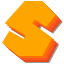
<style>
.page{position:relative;width:64px;height:64px;background:#ffa500}
.page>*{position:absolute;margin:0}
.t1{font:74.4px "SuperMarioGalaxy";color:#ffa500}
</style>
<div class="page">
<p class="t1" style="left:2px;top:1px;width:54px;height:55px">s</p>
<p class="t1" style="left:4px;top:3px;width:54px;height:55px">s</p>
<p class="t1" style="left:6px;top:5px;width:54px;height:55px">s</p>
<p class="t1" style="left:8px;top:7px;width:54px;height:55px">s</p>
</div>
